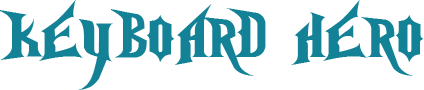
<style>
.page{position:relative;width:424px;height:90px;background:#ffffff}
.page>*{position:absolute;margin:0}
.t1{font:60px "NightmareHero";color:#148296}
</style>
<div class="page">
<p class="t1" style="left:0px;top:0px;width:424px;height:90px">KEYBOARD  HERO</p>
</div>
